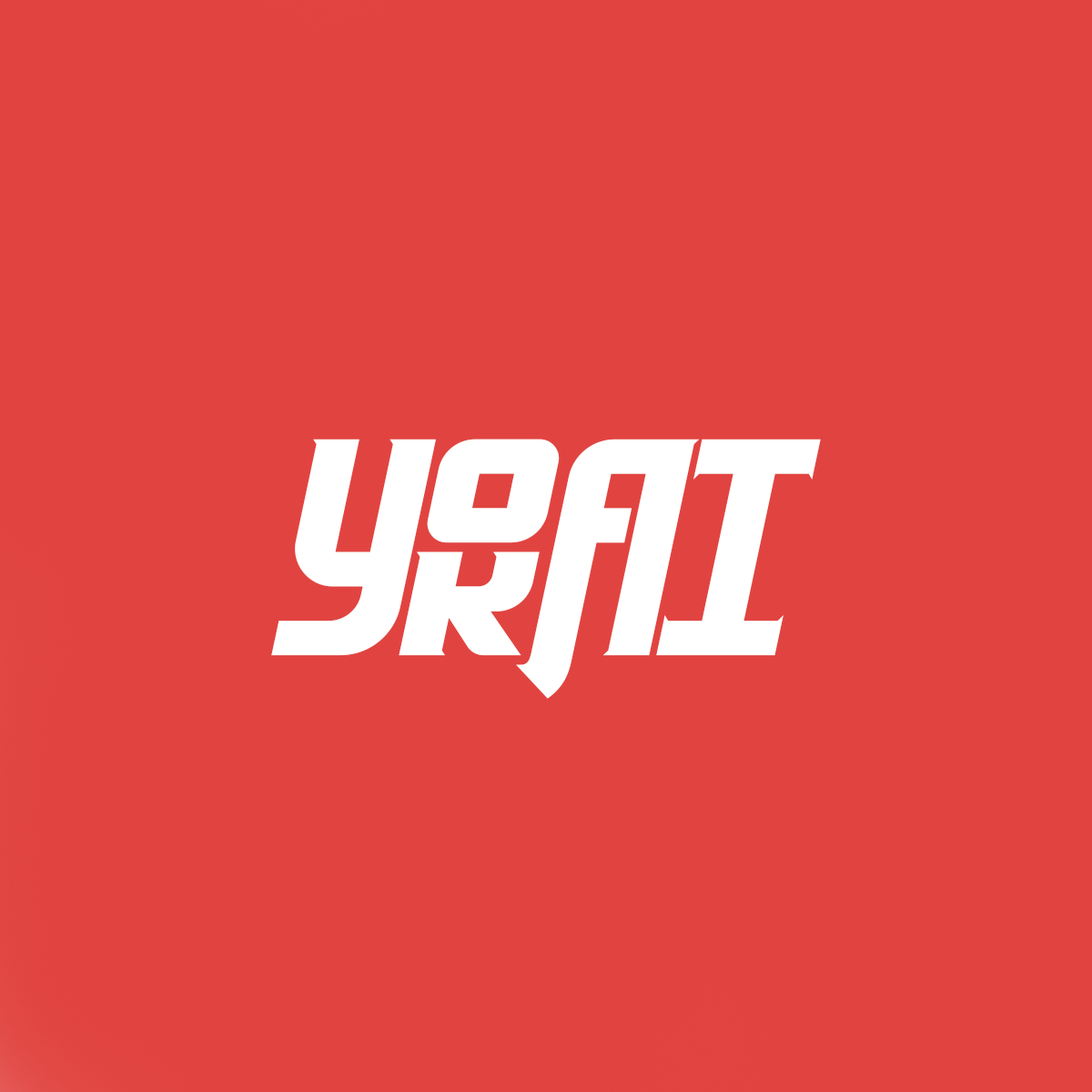
<style>
.page{position:relative;width:1092px;height:1092px;background:#e14440}
.page>*{position:absolute;margin:0}
.t1{font:308.3px "TokioNoirRegular";color:#ffffff}
</style>
<div class="page">
<p class="t1" style="left:271px;top:439px;width:550px;height:260px">YOKAI</p>
</div>
